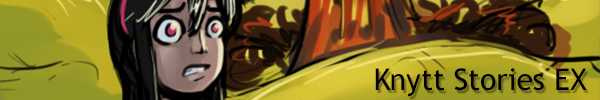
<style>
.page{position:relative;width:600px;height:100px}
.page>*{position:absolute;margin:0}
.t1{font:30px "TrebuchetMS";color:#000000}
</style>
<div class="page">
<p class="t1" style="left:375px;top:68px;width:212px;height:29px">Knytt Stories EX</p>
</div>
